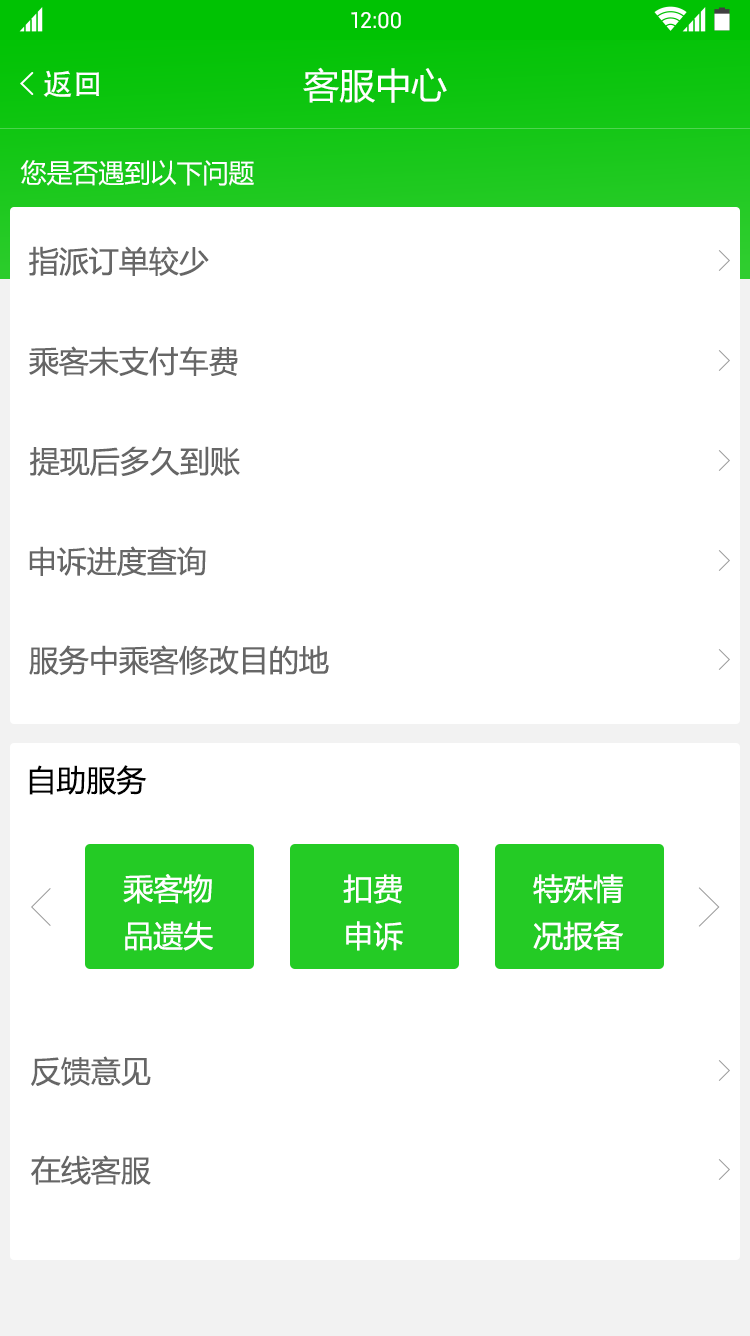
<style>
.page{position:relative;width:750px;height:1336px;background:#ffffff}
.page>*{position:absolute;margin:0}
.t1{font:22px "Roboto-Regular";color:#ffffff}
.t2{font:30px "AdobeHeitiStd-Regular";color:#ffffff}
.t3{font:36px "MicrosoftYaHei";color:#ffffff}
.t4{font:26px "MicrosoftYaHei";color:#ffffff}
.t5{font:30px "MicrosoftYaHei";color:#666666;text-transform:uppercase}
.t6{font:30px "MicrosoftYaHei";color:#000000;text-transform:uppercase}
.t7{font:30px/47px "MicrosoftYaHei";color:#ffffff;text-transform:uppercase}
</style>
<div class="page">
<p class="t1" style="left:351px;top:12px;width:50px;height:17px">12:00</p>
<p class="t2" style="left:43px;top:70px;width:56px;height:27px">返回</p>
<p class="t3" style="left:303px;top:67px;width:144px;height:36px">客服中心</p>
<p class="t4" style="left:20px;top:160px;width:234px;height:26px">您是否遇到以下问题</p>
<p class="t5" style="left:29px;top:246px;width:180px;height:30px">指派订单较少</p>
<p class="t5" style="left:29px;top:346px;width:209px;height:30px">乘客未支付车费</p>
<p class="t5" style="left:30px;top:446px;width:210px;height:31px">提现后多久到账</p>
<p class="t5" style="left:29px;top:546px;width:177px;height:30px">申诉进度查询</p>
<p class="t5" style="left:29px;top:645px;width:300px;height:31px">服务中乘客修改目的地</p>
<p class="t6" style="left:29px;top:765px;width:118px;height:30px">自助服务</p>
<p class="t7" style="left:123px;top:874px;width:90px;height:77px;text-align:center">乘客物<br>品遗失</p>
<p class="t7" style="left:343px;top:874px;width:60px;height:77px;text-align:center">扣费<br>申诉</p>
<p class="t7" style="left:533px;top:874px;width:90px;height:77px;text-align:center">特殊情<br>况报备</p>
<p class="t5" style="left:31px;top:1056px;width:120px;height:30px">反馈意见</p>
<p class="t5" style="left:31px;top:1155px;width:120px;height:30px">在线客服</p>
</div>
